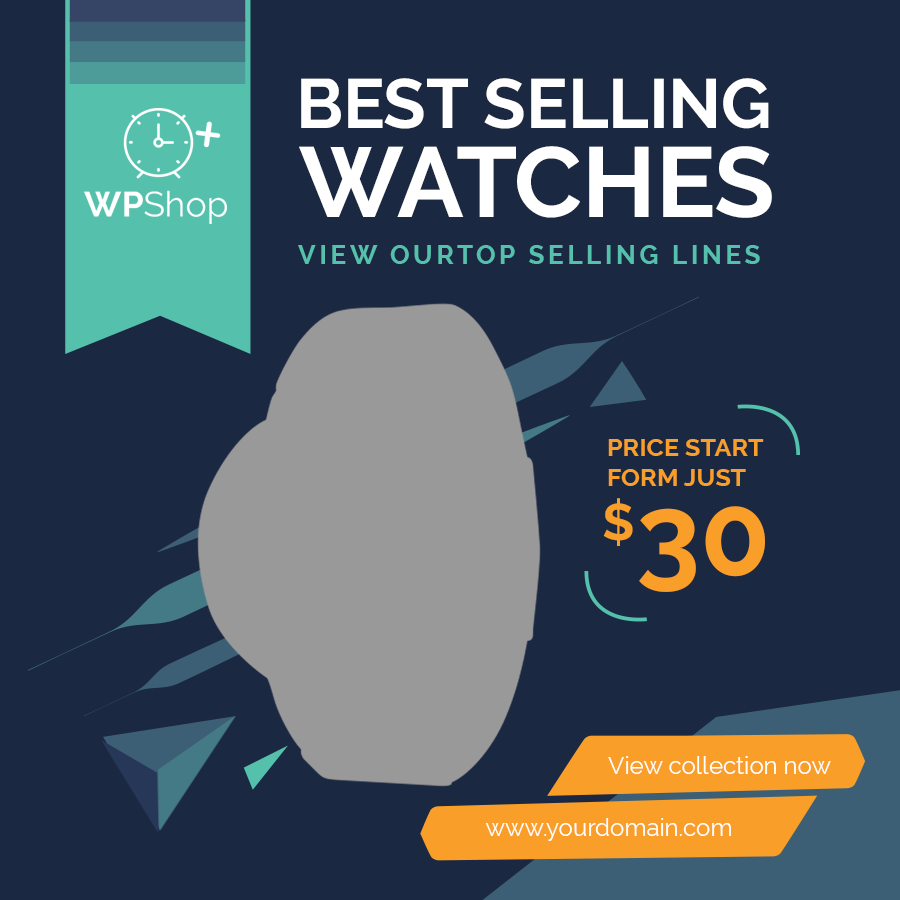
<style>
.page{position:relative;width:900px;height:900px;background:#1a2841}
.page>*{position:absolute;margin:0}
.t1{font:69.4px "Raleway-Bold";color:#ffffff}
.t2{font:98.9px "Raleway-Bold";color:#ffffff}
.t3{font:25.7px "Raleway-Bold";letter-spacing:0.15em;color:#55c1ac}
.t4{font:25.3px "Raleway-Bold";color:#f99e28}
.t5{font:51.3px "Raleway-Bold";color:#f99e28}
.t6{font:114.6px "Raleway-Bold";color:#f99e28}
.t7{font:24px "Raleway-Regular";color:#ffffff}
</style>
<div class="page">
<p class="t1" style="left:301px;top:78px;width:468px;height:51px">BEST SELLING</p>
<p class="t2" style="left:299px;top:146px;width:473px;height:72px">WATCHES</p>
<p class="t3" style="left:298px;top:245px;width:462px;height:19px">VIEW OURTOP SELLING LINES</p>
<p class="t4" style="left:608px;top:439px;width:156px;height:47px">PRICE START<br>FORM JUST</p>
<p class="t5" style="left:603px;top:498px;width:30px;height:48px">$</p>
<p class="t6" style="left:639px;top:506px;width:126px;height:86px">30</p>
<p class="t7" style="left:608px;top:756px;width:223px;height:18px">View collection now</p>
<p class="t7" style="left:485px;top:818px;width:246px;height:23px">www.yourdomain.com</p>
</div>
